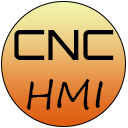
<style>
.page{position:relative;width:128px;height:128px;background:#ffffff}
.page>*{position:absolute;margin:0}
.t1{font:41.7px "Orbitron-Medium";color:#000000}
.t2{font:37.5px "SegoeScript";color:#000000}
</style>
<div class="page">
<p class="t1" style="left:14px;top:30px;width:100px;height:30px">CNC</p>
<p class="t2" style="left:27px;top:79px;width:76px;height:31px">HMI</p>
</div>
